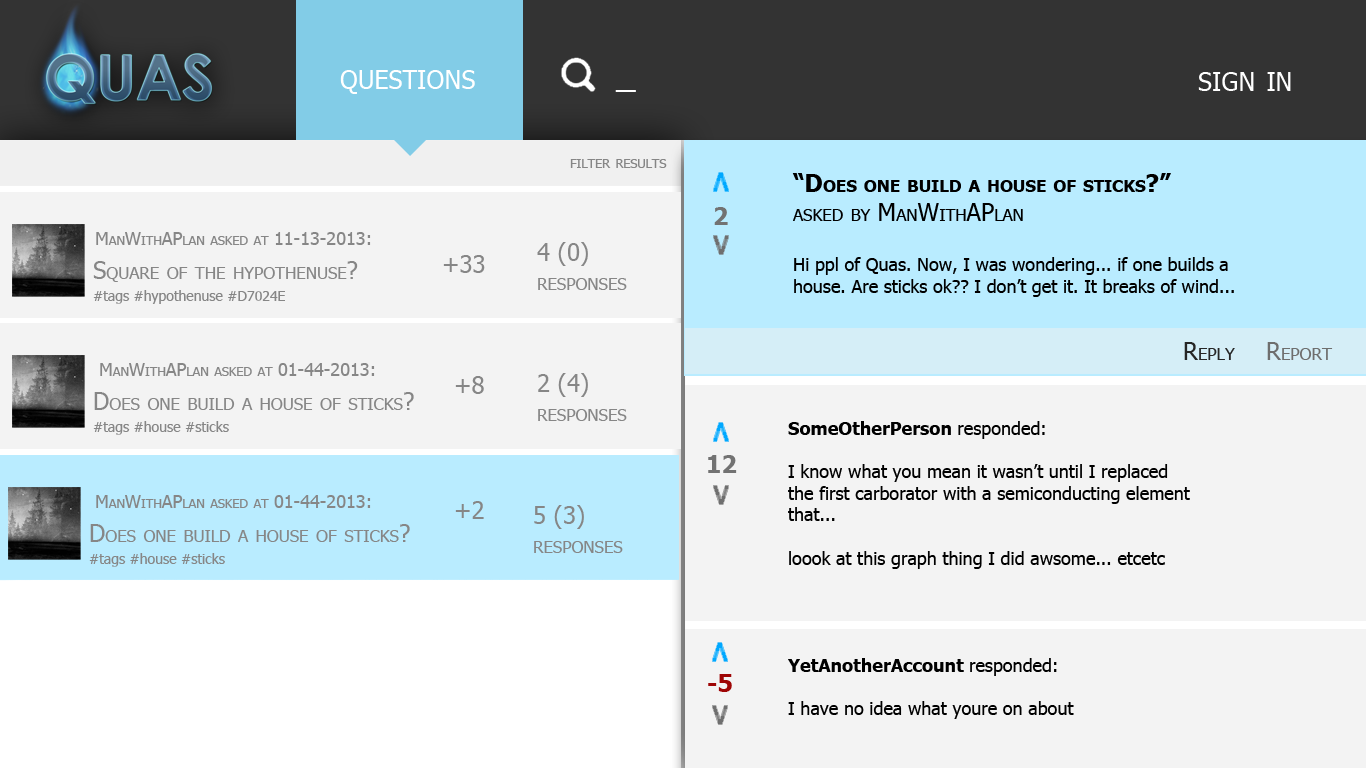
<style>
.page{position:relative;width:1366px;height:768px;background:#f3f3f3}
.page>*{position:absolute;margin:0}
.t1{font:36px "Tahoma";color:#ffffff;font-variant:small-caps}
.t2{font:18px "Tahoma";color:#868686;font-variant:small-caps}
.t3{font:18px "Tahoma";color:#000000}
.t4{font:24px "Tahoma-Bold";color:#000000;font-variant:small-caps}
.t5{font:24px "Tahoma";color:#000000;font-variant:small-caps}
.t6{font:24px "Tahoma-Bold";color:#727272;font-variant:small-caps}
.t7{font:24px "Tahoma";color:#868686;font-variant:small-caps}
.t8{font:14px "Tahoma";color:#868686}
.t9{font:24px "Tahoma";color:#262626;font-variant:small-caps}
.t10{font:24px "Tahoma";color:#6e6e6e;font-variant:small-caps}
.t11{font:18px "Tahoma-Bold";color:#000000}
.t12{font:24px "Tahoma-Bold";color:#9e0505;font-variant:small-caps}
</style>
<div class="page">
<p class="t1" style="left:340px;top:70px;width:135px;height:24px">questions</p>
<p class="t1" style="left:1198px;top:72px;width:93px;height:19px">sign in</p>
<p class="t1" style="left:615px;top:90px;width:21px;height:2px">_</p>
<p class="t2" style="left:570px;top:159px;width:97px;height:9px">filter results</p>
<p class="t3" style="left:792px;top:173px;width:442px;height:124px"><span class="t4">“Does one build a house of sticks?”<br></span><span class="t5">asked by ManWithAPlan<br><br></span>Hi ppl of Quas. Now, I was wondering... if one builds a <br>house. Are sticks ok?? I don’t get it. It breaks of wind...</p>
<p class="t6" style="left:714px;top:207px;width:14px;height:18px">2</p>
<p class="t2" style="left:96px;top:232px;width:275px;height:13px">ManWithAPlan asked at 11-13-2013:</p>
<p class="t7" style="left:537px;top:242px;width:90px;height:48px">4 (0) <br>responses</p>
<p class="t7" style="left:443px;top:255px;width:42px;height:18px">+33</p>
<p class="t7" style="left:93px;top:261px;width:265px;height:21px">Square of the hypothenuse?</p>
<p class="t8" style="left:93px;top:290px;width:192px;height:14px">#tags #hypothenuse #D7024E</p>
<p class="t9" style="left:1184px;top:342px;width:51px;height:18px">Reply</p>
<p class="t10" style="left:1267px;top:342px;width:66px;height:18px">Report</p>
<p class="t2" style="left:100px;top:363px;width:275px;height:13px">ManWithAPlan asked at 01-44-2013:</p>
<p class="t7" style="left:455px;top:376px;width:29px;height:18px">+8</p>
<p class="t7" style="left:538px;top:373px;width:89px;height:48px">2 (4) <br>responses</p>
<p class="t7" style="left:94px;top:392px;width:320px;height:18px">Does one build a house of sticks?</p>
<p class="t8" style="left:93px;top:421px;width:136px;height:14px">#tags #house #sticks</p>
<p class="t3" style="left:788px;top:421px;width:402px;height:148px"><span class="t11">SomeOtherPerson </span>responded:<br><br>I know what you mean it wasn’t until I replaced<br>the first carborator with a semiconducting element<br>that...<br><br>loook at this graph thing I did awsome... etcetc</p>
<p class="t6" style="left:708px;top:455px;width:29px;height:18px">12</p>
<p class="t2" style="left:96px;top:495px;width:275px;height:13px">ManWithAPlan asked at 01-44-2013:</p>
<p class="t7" style="left:455px;top:501px;width:29px;height:18px">+2</p>
<p class="t7" style="left:534px;top:505px;width:89px;height:48px">5 (3) <br>responses</p>
<p class="t7" style="left:90px;top:524px;width:320px;height:18px">Does one build a house of sticks?</p>
<p class="t8" style="left:89px;top:553px;width:136px;height:14px">#tags #house #sticks</p>
<p class="t3" style="left:788px;top:658px;width:286px;height:61px"><span class="t11">YetAnotherAccount </span>responded:<br><br>I have no idea what youre on about</p>
<p class="t12" style="left:708px;top:674px;width:24px;height:18px">-5</p>
</div>
